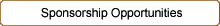
<style>
.page{position:relative;width:220px;height:26px;background:#ffffff}
.page>*{position:absolute;margin:0}
.t1{font:12px "ArialMT";color:#060808}
</style>
<div class="page">
<p class="t1" style="left:41px;top:8px;width:141px;height:12px">Sponsorship Opportunities</p>
</div>
